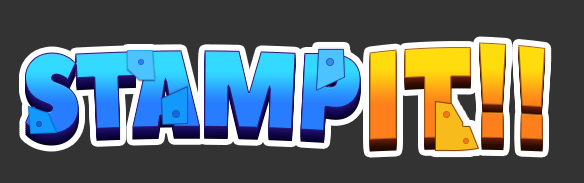
<style>
.page{position:relative;width:584px;height:183px;background:#333333}
.page>*{position:absolute;margin:0}
.t1{font:109.7px "PeaceSans";letter-spacing:-0.025em;scale:0.81 1}
.t2{font:123.7px "PeaceSans";scale:0.83 1}
</style>
<div class="page">
<p class="t1" style="left:25px;top:50px;width:336px;height:84px">STAMP</p>
<p class="t2" style="left:369px;top:42px;width:177px;height:98px">IT!!</p>
</div>
